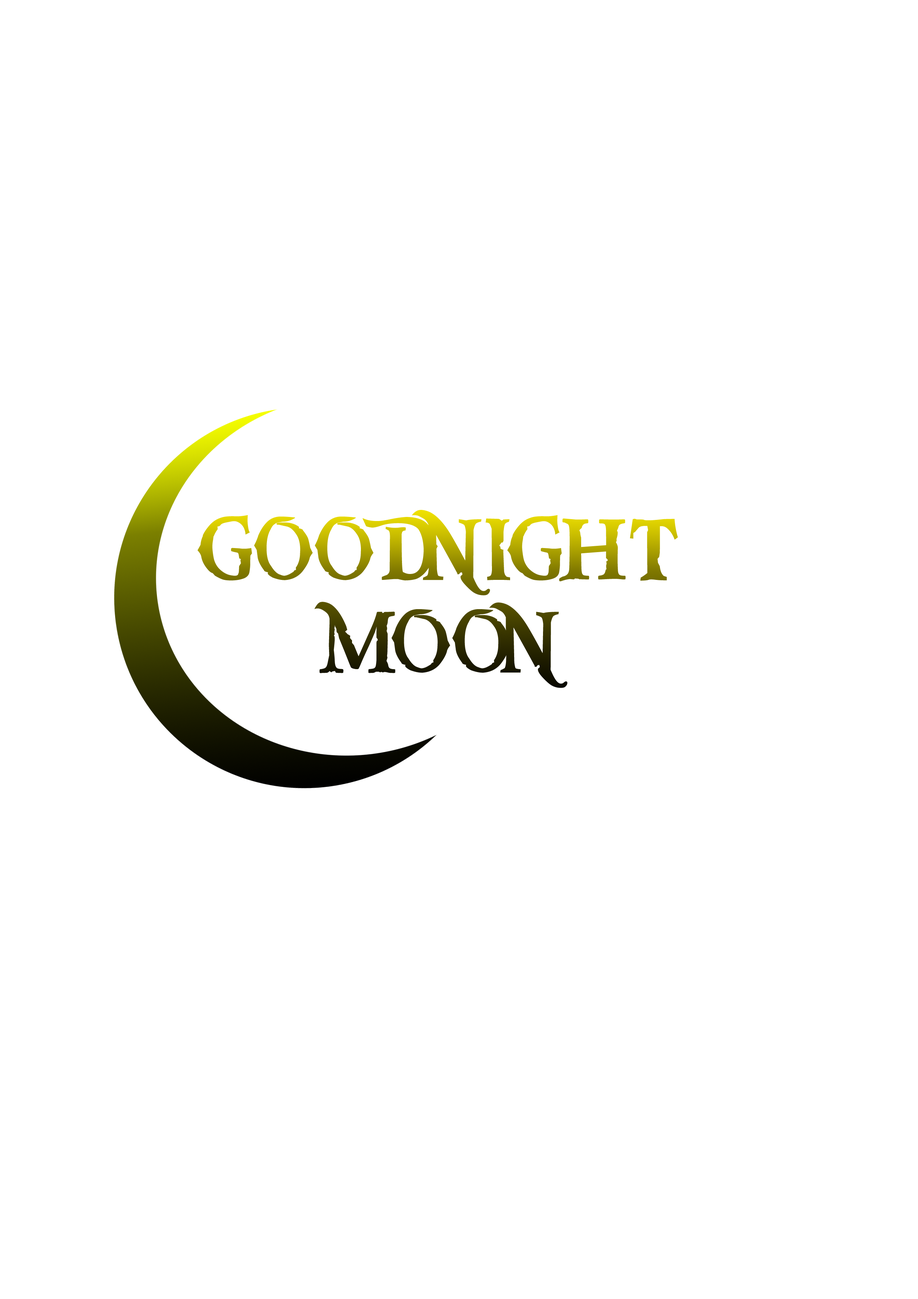
<style>
.page{position:relative;width:918px;height:1299px;background:#ffffff}
.page>*{position:absolute;margin:0}
.t1{font:92.6px/92.6px "PiecesofEight"}
</style>
<div class="page">
<p class="t1" style="left:197px;top:510px;width:481px;height:178px;text-align:center">GOODNIGHT<br>MOON</p>
</div>
